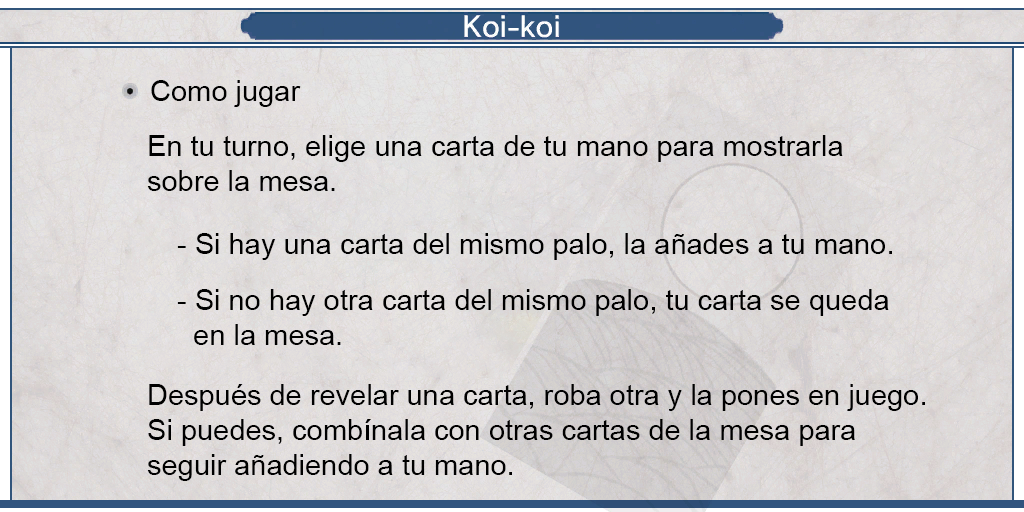
<style>
.page{position:relative;width:1024px;height:512px}
.page>*{position:absolute;margin:0}
.t1{font:29px "ArialMT";color:#000000}
</style>
<div class="page">
<p class="t1" style="left:151px;top:80px;width:150px;height:27px">Como jugar</p>
<p class="t1" style="left:147px;top:135px;width:696px;height:56px;text-align:justify">En tu turno, elige una carta de tu mano para mostrarla<br>sobre la mesa.</p>
<p class="t1" style="left:177px;top:233px;width:715px;height:112px;text-align:justify">- Si hay una carta del mismo palo, la añades a tu mano.<br><br>- Si no hay otra carta del mismo palo, tu carta se queda<br>  en la mesa.</p>
<p class="t1" style="left:147px;top:384px;width:778px;height:97px;text-align:justify">Después de revelar una carta, roba otra y la pones en juego.<br>Si puedes, combínala con otras cartas de la mesa para<br>seguir añadiendo a tu mano.</p>
</div>
